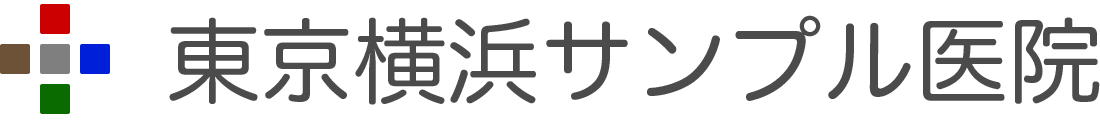
<style>
.page{position:relative;width:1100px;height:120px;background:#ffffff}
.page>*{position:absolute;margin:0}
.t1{font:92.7px "HiraMaruPro-W4";letter-spacing:0.01em;color:#4b4b4b}
</style>
<div class="page">
<p class="t1" style="left:169px;top:15px;width:931px;height:90px">東京横浜サンプル医院</p>
</div>
